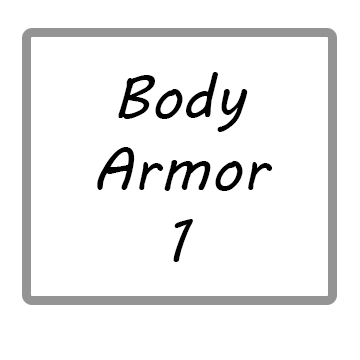
<style>
.page{position:relative;width:360px;height:360px;background:#ffffff}
.page>*{position:absolute;margin:0}
.t1{font:60px "MVBoli";color:#000000}
.t2{font:23.3px "MVBoli";color:#000000}
</style>
<div class="page">
<p class="t1" style="left:97px;top:72px;width:176px;height:190px;text-align:center"><span class="t2"><br></span>Body <br>Armor <br>1</p>
</div>
